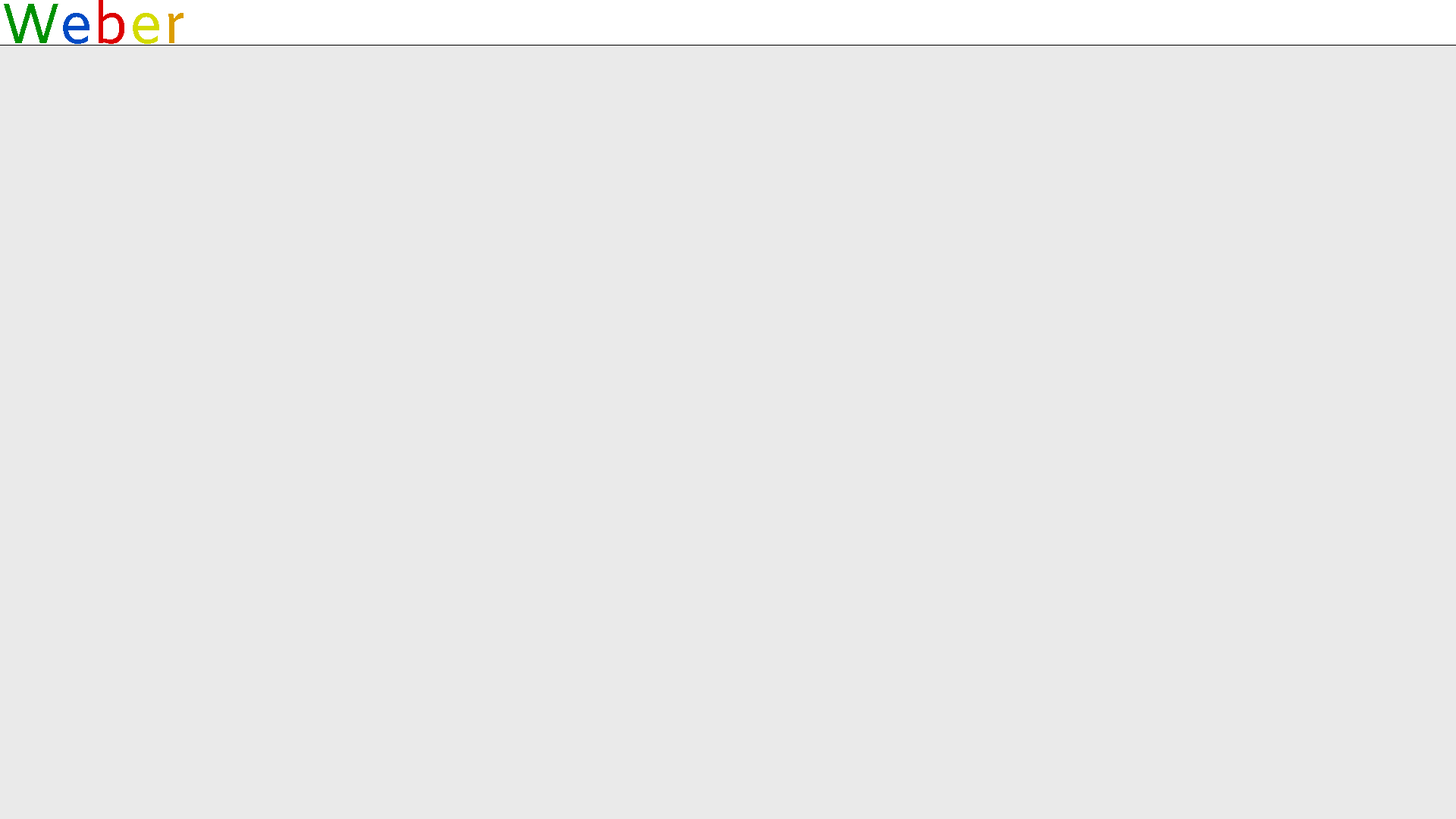
<style>
.page{position:relative;width:1456px;height:819px;background:#eaeaea}
.page>*{position:absolute;margin:0}
.t1{font:56.9px "Amiko-Regular";color:#009102}
.t2{font:56.9px "Amiko-Regular";color:#004bc4}
.t3{font:56.9px "Amiko-Regular";color:#dc0000}
.t4{font:56.9px "Amiko-Regular";color:#d4db00}
.t5{font:56.9px "Amiko-Regular";color:#db9d00}
</style>
<div class="page">
<p class="t1" style="left:4px;top:0px;width:180px;height:44px">W<span class="t2">e</span><span class="t3">b</span><span class="t4">e</span><span class="t5">r</span></p>
</div>
